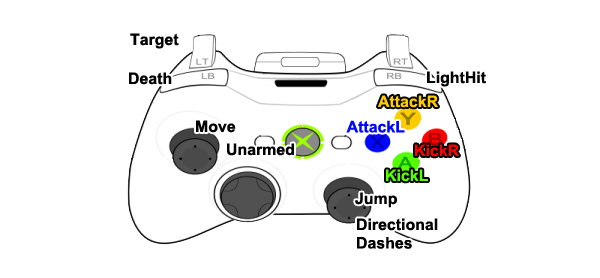
<style>
.page{position:relative;width:600px;height:278px;background:#ffffff}
.page>*{position:absolute;margin:0}
.t1{font:15.9px "Arial-BoldMT";color:#000000}
.t2{font:15.9px "Arial-BoldMT";color:#ffcc00}
.t3{font:15.9px "Arial-BoldMT";color:#0006ff}
.t4{font:15.9px "Arial-BoldMT";color:#ff0000}
.t5{font:15.9px "Arial-BoldMT";color:#54ff00}
.t6{font:15.9px/18.4px "Arial-BoldMT";color:#000000}
</style>
<div class="page">
<p class="t1" style="left:130px;top:33px;width:49px;height:16px">Target</p>
<p class="t1" style="left:129px;top:72px;width:43px;height:13px">Death</p>
<p class="t1" style="left:427px;top:71px;width:59px;height:16px">LightHit</p>
<p class="t2" style="left:378px;top:95px;width:60px;height:13px">AttackR</p>
<p class="t1" style="left:196px;top:120px;width:40px;height:13px">Move</p>
<p class="t3" style="left:346px;top:120px;width:59px;height:13px">AttackL</p>
<p class="t1" style="left:227px;top:143px;width:67px;height:13px">Unarmed</p>
<p class="t4" style="left:415px;top:144px;width:44px;height:13px">KickR</p>
<p class="t5" style="left:386px;top:169px;width:42px;height:13px">KickL</p>
<p class="t1" style="left:355px;top:192px;width:42px;height:16px">Jump</p>
<p class="t6" style="left:357px;top:218px;width:81px;height:31px">Directional<br>Dashes</p>
</div>
